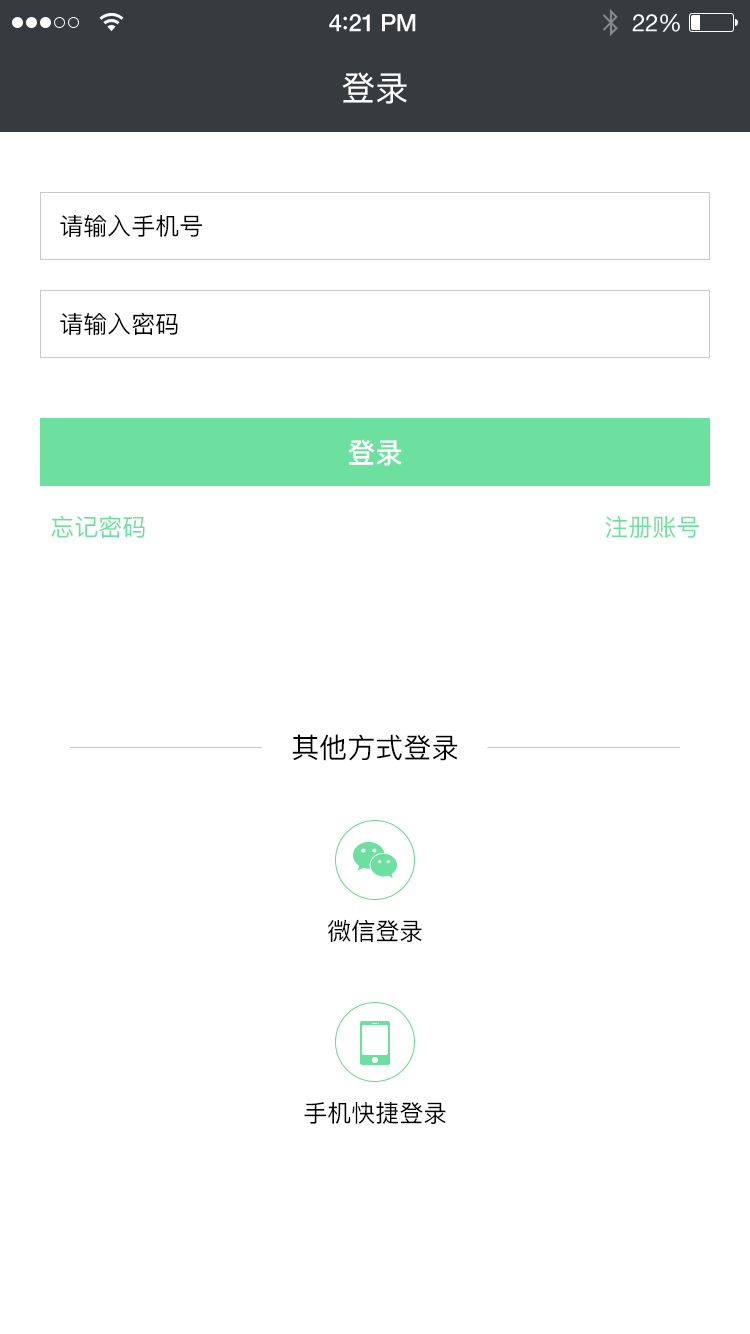
<style>
.page{position:relative;width:750px;height:1334px;background:#ffffff}
.page>*{position:absolute;margin:0}
.t1{font:34px "PingFangSC-Regular";color:#ffffff}
.t2{font:24px "PingFangSC-Regular";color:#000000}
.t3{font:28px "PingFangSC-Medium";color:#ffffff}
.t4{font:24px "PingFangSC-Regular";color:#6ce09e}
.t5{font:28px "PingFangSC-Regular";color:#000000}
</style>
<div class="page">
<p class="t1" style="left:342px;top:72px;width:65px;height:32px">登录</p>
<p class="t2" style="left:60px;top:214px;width:142px;height:23px">请输入手机号</p>
<p class="t2" style="left:60px;top:312px;width:118px;height:23px">请输入密码</p>
<p class="t3" style="left:348px;top:439px;width:54px;height:27px">登录</p>
<p class="t4" style="left:51px;top:515px;width:94px;height:23px">忘记密码</p>
<p class="t4" style="left:605px;top:515px;width:94px;height:23px">注册账号</p>
<p class="t5" style="left:292px;top:734px;width:166px;height:27px">其他方式登录</p>
<p class="t2" style="left:328px;top:919px;width:94px;height:23px">微信登录</p>
<p class="t2" style="left:304px;top:1102px;width:142px;height:22px">手机快捷登录</p>
</div>
